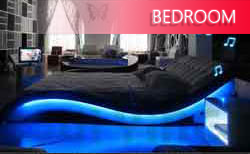
<style>
.page{position:relative;width:250px;height:154px}
.page>*{position:absolute;margin:0}
.t1{font:18px "NirmalaUI-Semilight";color:#fafbfc}
</style>
<div class="page">
<p class="t1" style="left:153px;top:10px;width:82px;height:13px">BEDROOM</p>
</div>
